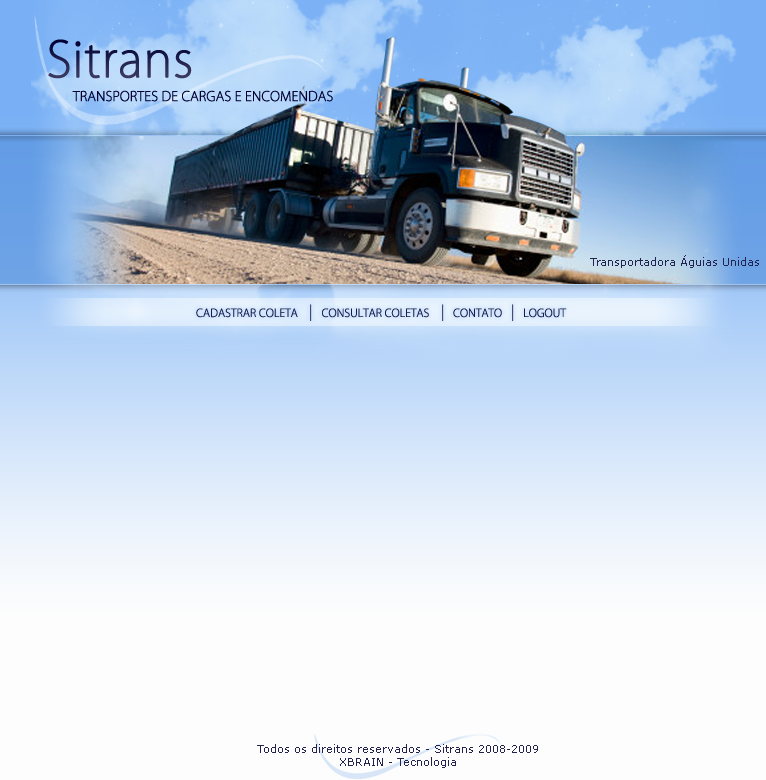
<style>
.page{position:relative;width:766px;height:780px}
.page>*{position:absolute;margin:0}
.t1{font:48px "KozGoPro-ExtraLight";color:#232350;font-weight:bold}
.t2{font:13px "KozGoPro-ExtraLight";color:#000033;font-weight:bold}
.t3{font:11px "Verdana";color:#232350}
.t4{font:11px "KozGoPro-Light";color:#1a1a48}
</style>
<div class="page">
<p class="t1" style="left:48px;top:39px;width:144px;height:40px">Sitrans</p>
<p class="t2" style="left:72px;top:90px;width:261px;height:12px">TRANSPORTES DE CARGAS E ENCOMENDAS</p>
<p class="t3" style="left:590px;top:255px;width:169px;height:13px">Transportadora Águias Unidas</p>
<p class="t4" style="left:196px;top:308px;width:371px;height:10px">CADASTRAR COLETA         CONSULTAR COLETAS         CONTATO        LOGOUT</p>
<p class="t3" style="left:257px;top:744px;width:281px;height:24px;text-align:center">Todos os direitos reservados - Sitrans 2008-2009<br>XBRAIN - Tecnologia</p>
</div>
